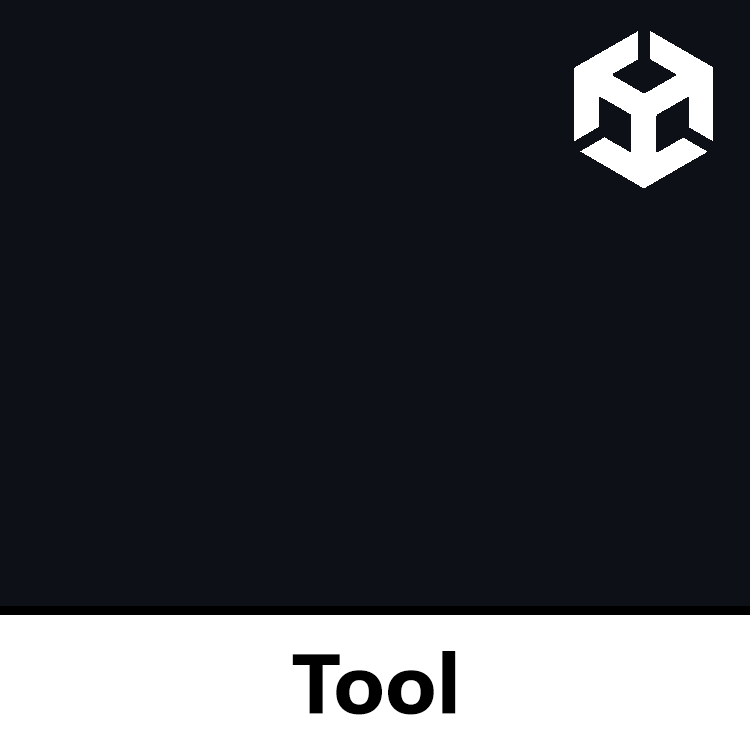
<style>
.page{position:relative;width:750px;height:750px;background:#0d1117}
.page>*{position:absolute;margin:0}
.t1{font:84.5px "SegoeUI-Bold";color:#000000}
</style>
<div class="page">
<p class="t1" style="left:292px;top:651px;width:164px;height:64px">Tool</p>
</div>
